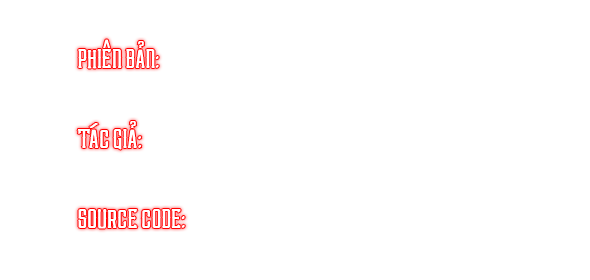
<style>
.page{position:relative;width:590px;height:280px;background:#ffffff}
.page>*{position:absolute;margin:0}
.t1{font:25px "TUVBenchmark";color:#ffffff}
</style>
<div class="page">
<p class="t1" style="left:78px;top:39px;width:81px;height:30px">Phiên bản:</p>
<p class="t1" style="left:77px;top:121px;width:65px;height:29px">Tác Giả:</p>
<p class="t1" style="left:78px;top:209px;width:107px;height:20px">Source code:</p>
</div>
